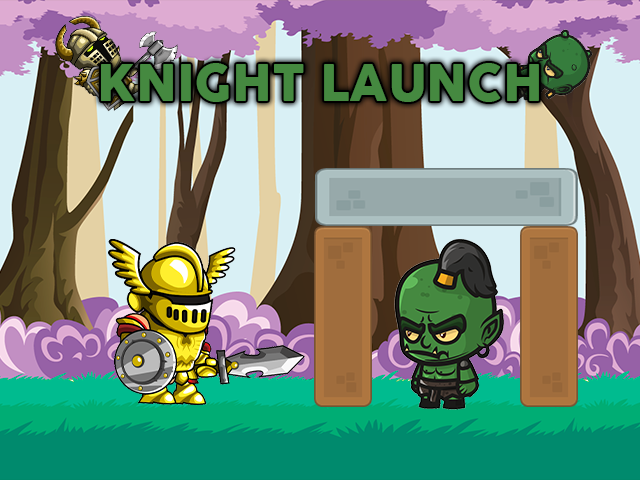
<style>
.page{position:relative;width:640px;height:480px}
.page>*{position:absolute;margin:0}
.t1{font:50px "Cocogoose";color:#458940}
</style>
<div class="page">
<p class="t1" style="left:101px;top:63px;width:438px;height:39px">KNIGHT LAUNCH</p>
</div>
